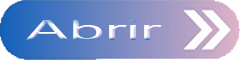
<style>
.page{position:relative;width:240px;height:60px}
.page>*{position:absolute;margin:0}
.t1{font:27.9px "ArialMT";scale:2.3 1}
</style>
<div class="page">
<p class="t1" style="left:26px;top:20px;width:136px;height:20px">Abrir</p>
</div>
